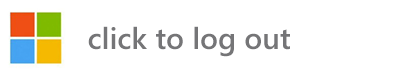
<style>
.page{position:relative;width:400px;height:75px;background:#ffffff}
.page>*{position:absolute;margin:0}
.t1{font:30px "SegoeUI-Semibold";color:#757577}
</style>
<div class="page">
<p class="t1" style="left:88px;top:26px;width:202px;height:31px">click to log out</p>
</div>
